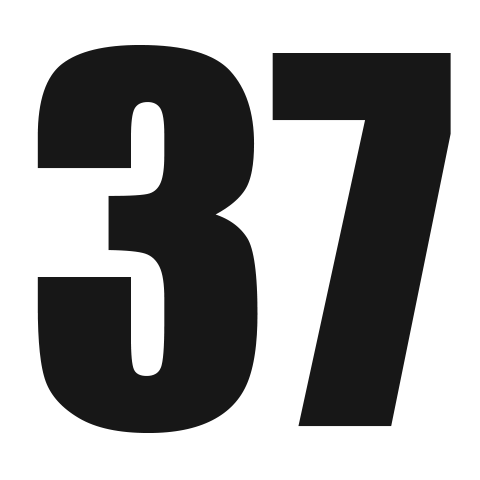
<style>
.page{position:relative;width:480px;height:480px;background:#ffffff}
.page>*{position:absolute;margin:0}
.t1{font:472.3px "Impact";color:#171717}
</style>
<div class="page">
<p class="t1" style="left:37px;top:45px;width:414px;height:388px">37</p>
</div>
